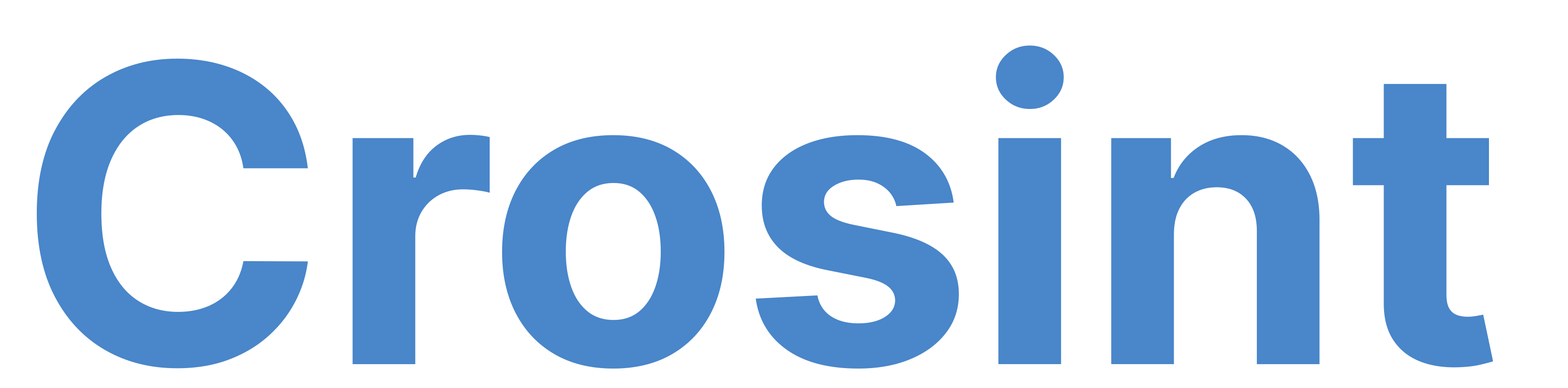
<style>
.page{position:relative;width:1568px;height:388px;background:#ffffff}
.page>*{position:absolute;margin:0}
.t1{font:414.3px "Inter-Bold";color:#4986ca}
</style>
<div class="page">
<p class="t1" style="left:37px;top:45px;width:1456px;height:323px">Crosint</p>
</div>
